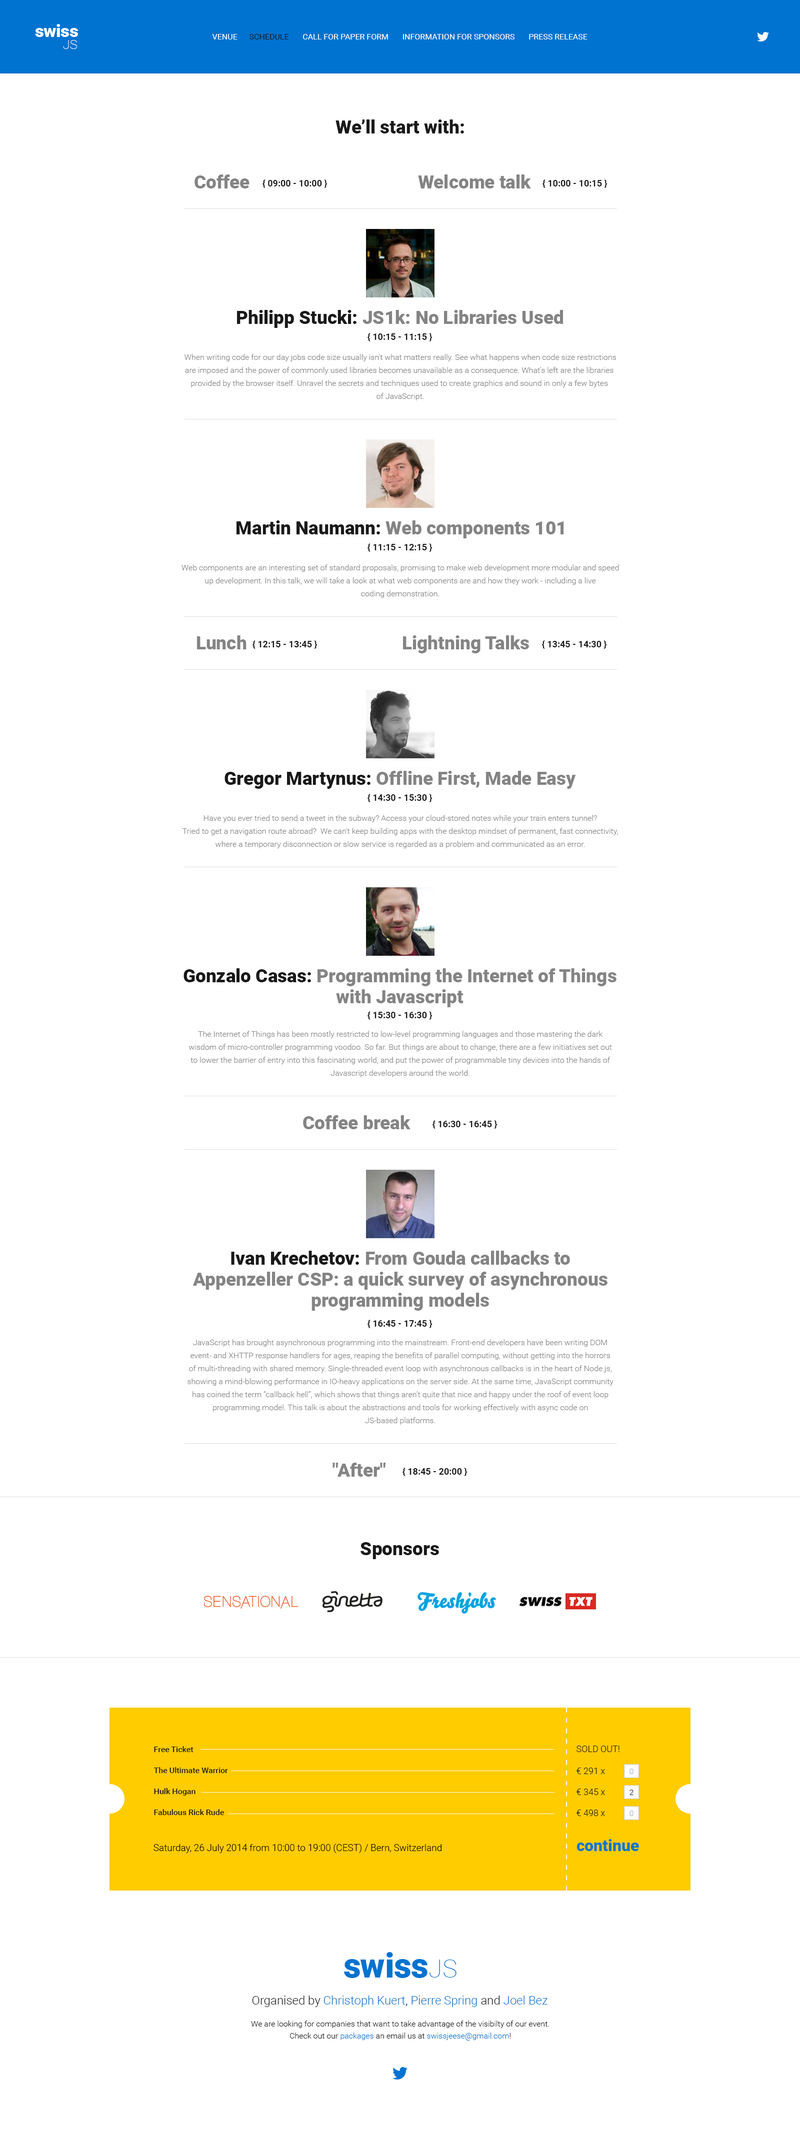
<style>
.page{position:relative;width:800px;height:2136px;background:#ffffff}
.page>*{position:absolute;margin:0}
.t1{font:17.3px "Roboto-Black";letter-spacing:-0.01em;color:#ffffff}
.t2{font:17.3px "Roboto-Black";letter-spacing:-0.02em;color:#ffffff}
.t3{font:17.3px "Roboto-Black";color:#ffffff}
.t4{font:12.8px "Roboto-Thin";color:#ffffff}
.t5{font:8px "Roboto-Regular";color:#ffffff;text-transform:uppercase}
.t6{font:8px "Roboto-Regular";color:#191919;text-transform:uppercase}
.t7{font:18.5px "Roboto-Black";color:#191919}
.t8{font:18.5px "Roboto-Black";color:#848484}
.t9{font:9px "Roboto-Bold";color:#191919}
.t10{font:8px/13px "Roboto-Light";color:#848484}
.t11{font:18.5px/21px "Roboto-Black";color:#848484}
.t12{font:18.5px/21px "Roboto-Black";color:#191919}
.t13{font:9px "Roboto-Light";color:#191919;text-transform:uppercase}
.t14{font:8px/21px "Roboto-Medium";color:#191919}
.t15{font:9px/21px "Roboto-Light";color:#191919}
.t16{font:8px "Roboto-Light";color:#a9afb3}
.t17{font:8px "Roboto-Light";color:#191919}
.t18{font:16px "Roboto-Black";color:#0074d0}
.t19{font:9.5px "Roboto-Light";color:#000000}
.t20{font:34.1px "Roboto-Black";letter-spacing:-0.01em;color:#0073d0}
.t21{font:34.1px "Roboto-Black";letter-spacing:-0.02em;color:#0073d0}
.t22{font:34.1px "Roboto-Black";color:#0073d0}
.t23{font:25.2px "Roboto-Thin";color:#0073d0}
.t24{font:12px "Roboto-Light";color:#0073d0}
.t25{font:12px "Roboto-Light";color:#191919}
.t26{font:8px/12px "Roboto-Light";color:#191919}
.t27{font:8px/12px "Roboto-Light";color:#0073d0}
</style>
<div class="page">
<p class="t1" style="left:35px;top:24px;width:43px;height:13px"><span class="t2">s</span><span class="t3">w</span>is<span class="t3">s</span></p>
<p class="t4" style="left:63px;top:40px;width:14px;height:9px">JS</p>
<p class="t5" style="left:212px;top:34px;width:375px;height:5px">Venue      <span class="t6">Schedule</span>       Call for paper form       Information for sponsors       Press release</p>
<p class="t7" style="left:335px;top:119px;width:129px;height:14px">We’ll start with:</p>
<p class="t8" style="left:194px;top:174px;width:55px;height:14px">Coffee</p>
<p class="t9" style="left:262px;top:179px;width:65px;height:9px">{ 09:00 - 10:00 }</p>
<p class="t8" style="left:418px;top:174px;width:113px;height:14px">Welcome talk</p>
<p class="t9" style="left:542px;top:179px;width:65px;height:9px">{ 10:00 - 10:15 }</p>
<p class="t8" style="left:237px;top:310px;width:326px;height:18px"><span class="t7">Philipp Stucki: </span>JS1k: No Libraries Used</p>
<p class="t9" style="left:367px;top:333px;width:65px;height:8px">{ 10:15 - 11:15 }</p>
<p class="t10" style="left:184px;top:354px;width:432px;height:46px;text-align:center">When writing code for our day jobs code size usually isn't what matters really. See what happens when code size restrictions<br>are imposed and the power of commonly used libraries becomes unavailable as a consequence. What's left are the libraries <br>provided by the browser itself. Unravel the secrets and techniques used to create graphics and sound in only a few bytes <br>of JavaScript.</p>
<p class="t8" style="left:236px;top:520px;width:328px;height:18px"><span class="t7">Martin Naumann: </span>Web components 101</p>
<p class="t9" style="left:367px;top:543px;width:65px;height:9px">{ 11:15 - 12:15 }</p>
<p class="t10" style="left:181px;top:564px;width:438px;height:34px;text-align:center">Web components are an interesting set of standard proposals, promising to make web development more modular and speed<br>up development. In this talk, we will take a look at what web components are and how they work - including a live<br>coding demonstration.</p>
<p class="t8" style="left:197px;top:635px;width:49px;height:14px">Lunch</p>
<p class="t9" style="left:252px;top:640px;width:65px;height:9px">{ 12:15 - 13:45 }</p>
<p class="t8" style="left:403px;top:635px;width:126px;height:18px">Lightning Talks</p>
<p class="t9" style="left:542px;top:640px;width:64px;height:9px">{ 13:45 - 14:30 }</p>
<p class="t8" style="left:224px;top:771px;width:352px;height:18px"><span class="t7">Gregor Martynus: </span>Offline First, Made Easy</p>
<p class="t9" style="left:367px;top:794px;width:65px;height:8px">{ 14:30 - 15:30 }</p>
<p class="t10" style="left:182px;top:815px;width:436px;height:33px;text-align:center">Have you ever tried to send a tweet in the subway? Access your cloud-stored notes while your train enters tunnel?<br>Tried to get a navigation route abroad?  We can't keep building apps with the desktop mindset of permanent, fast connectivity,<br>where a temporary disconnection or slow service is regarded as a problem and communicated as an error.</p>
<p class="t11" style="left:183px;top:968px;width:433px;height:39px;text-align:center"><span class="t12">Gonzalo Casas: </span>Programming the Internet of Things<br>with Javascript</p>
<p class="t9" style="left:367px;top:1011px;width:65px;height:9px">{ 15:30 - 16:30 }</p>
<p class="t10" style="left:188px;top:1031px;width:424px;height:46px;text-align:center">The Internet of Things has been mostly restricted to low-level programming languages and those mastering the dark<br>wisdom of micro-controller programming voodoo. So far. But things are about to change, there are a few initiatives set out<br>to lower the barrier of entry into this fascinating world, and put the power of programmable tiny devices into the hands of<br>Javascript developers around the world.</p>
<p class="t8" style="left:303px;top:1115px;width:107px;height:14px">Coffee break</p>
<p class="t9" style="left:432px;top:1120px;width:65px;height:9px">{ 16:30 - 16:45 }</p>
<p class="t11" style="left:193px;top:1251px;width:414px;height:60px;text-align:center"><span class="t12">Ivan Krechetov: </span>From Gouda callbacks to<br>Appenzeller CSP: a quick survey of asynchronous<br>programming models</p>
<p class="t9" style="left:367px;top:1320px;width:65px;height:8px">{ 16:45 - 17:45 }</p>
<p class="t10" style="left:187px;top:1339px;width:426px;height:86px;text-align:center">JavaScript has brought asynchronous programming into the mainstream. Front-end developers have been writing DOM<br>event- and XHTTP response handlers for ages, reaping the benefits of parallel computing, without getting into the horrors<br>of multi-threading with shared memory. Single-threaded event loop with asynchronous callbacks is in the heart of Node.js,<br>showing a mind-blowing performance in IO-heavy applications on the server side. At the same time, JavaScript community<br>has coined the term “callback hell”, which shows that things aren’t quite that nice and happy under the roof of event loop<br>programming model. This talk is about the abstractions and tools for working effectively with async code on<br>JS-based platforms.</p>
<p class="t8" style="left:332px;top:1463px;width:53px;height:14px">"After"</p>
<p class="t9" style="left:402px;top:1468px;width:65px;height:8px">{ 18:45 - 20:00 }</p>
<p class="t7" style="left:360px;top:1542px;width:79px;height:17px">Sponsors</p>
<p class="t13" style="left:576px;top:1746px;width:43px;height:6px">Sold out!</p>
<p class="t14" style="left:153px;top:1746px;width:75px;height:69px">Free Ticket<br>The Ultimate Warrior<br>Hulk Hogan<br>Fabulous Rick Rude</p>
<p class="t15" style="left:576px;top:1768px;width:29px;height:48px">€ 291 x<br>€ 345 x<br>€ 498 x</p>
<p class="t16" style="left:629px;top:1769px;width:4px;height:5px">0</p>
<p class="t17" style="left:629px;top:1790px;width:4px;height:5px">2</p>
<p class="t16" style="left:629px;top:1811px;width:4px;height:5px">0</p>
<p class="t18" style="left:576px;top:1839px;width:63px;height:12px">continue</p>
<p class="t19" style="left:153px;top:1844px;width:288px;height:9px">Saturday, 26 July 2014 from 10:00 to 19:00 (CEST) / Bern, Switzerland</p>
<p class="t20" style="left:344px;top:1952px;width:83px;height:26px"><span class="t21">s</span><span class="t22">w</span>is<span class="t22">s</span></p>
<p class="t23" style="left:429px;top:1960px;width:27px;height:18px">JS</p>
<p class="t24" style="left:252px;top:1996px;width:296px;height:11px"><span class="t25">Organised by </span>Christoph Kuert<span class="t25">, </span>Pierre Spring<span class="t25"> and </span>Joel Bez</p>
<p class="t26" style="left:251px;top:2021px;width:298px;height:20px;text-align:center">We are looking for companies that want to take advantage of the visibilty of our event.<br>Check out our <span class="t27">packages</span> an email us at <span class="t27">swissjeese@gmail.com</span>!</p>
</div>
